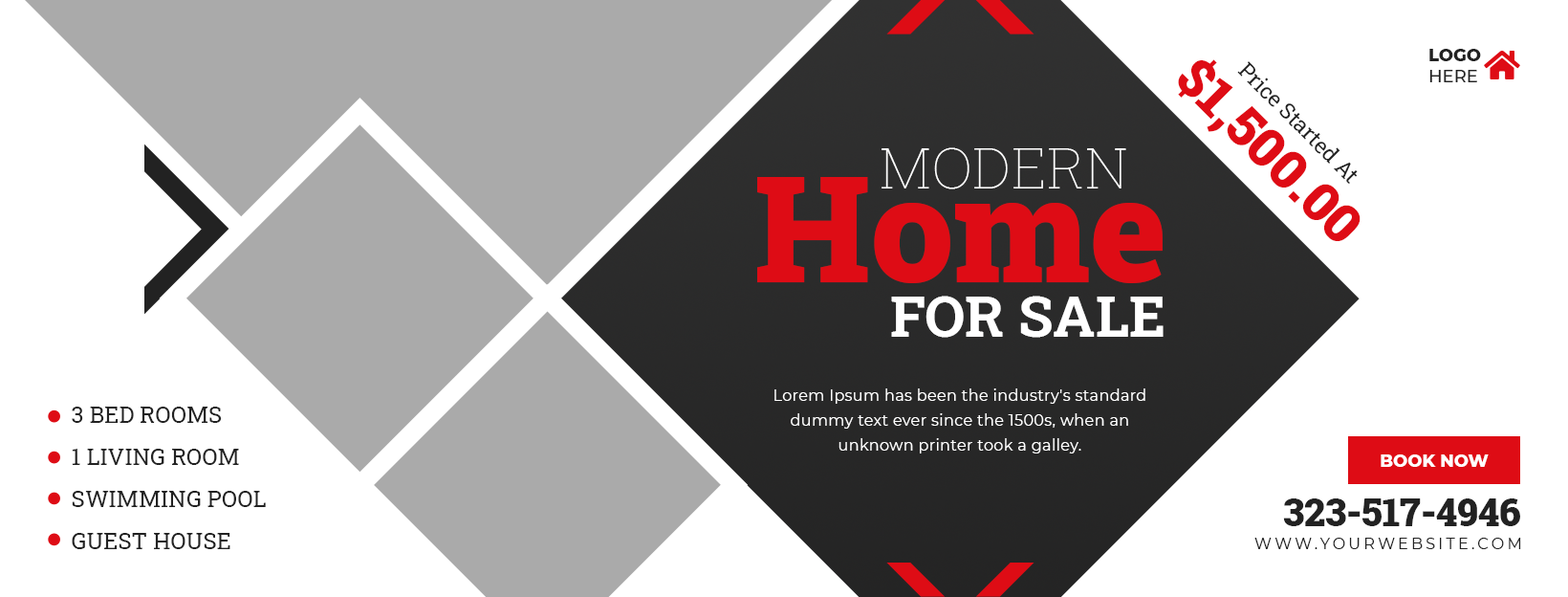
<style>
.page{position:relative;width:1568px;height:597px;background:#ffffff}
.page>*{position:absolute;margin:0}
.t1{font:17.2px "Montserrat-ExtraBold";color:#222222;text-transform:uppercase}
.t2{font:17.2px "Montserrat-Medium";color:#222222;text-transform:uppercase}
.t3{font:53.9px "RobotoSlab-Black";color:#de0c15}
.t4{font:21.6px "RobotoSlab-Regular";color:#222222}
.t5{font:57.4px "RobotoSlab-Thin";color:#ffffff;text-transform:uppercase}
.t6{font:147.2px "RobotoSlab-Black";color:#de0c15}
.t7{font:57.4px "RobotoSlab-Bold";color:#ffffff;text-transform:uppercase}
.t8{font:15.3px/24.9px "Montserrat-Regular";letter-spacing:0.025em;color:#ffffff}
.t9{font:22.9px/42.1px "RobotoSlab-Regular";color:#222222;text-transform:uppercase}
.t10{font:17.2px "Montserrat-ExtraBold";color:#ffffff;text-transform:uppercase}
.t11{font:38.2px "RobotoSlab-Black";color:#222222}
.t12{font:15.3px "Montserrat-Regular";letter-spacing:0.2em;color:#222222;text-transform:uppercase}
</style>
<div class="page">
<p class="t1" style="left:1429px;top:49px;width:52px;height:33px">Logo<br><span class="t2">Here</span></p>
<p class="t3" style="left:1178px;top:59px;width:183px;height:182px;rotate:45deg">$1,500.00</p>
<p class="t4" style="left:1237px;top:61px;width:121px;height:124px;rotate:45deg">Price Started At</p>
<p class="t5" style="left:882px;top:147px;width:244px;height:42px">Modern</p>
<p class="t6" style="left:757px;top:177px;width:406px;height:106px">Home</p>
<p class="t7" style="left:891px;top:295px;width:273px;height:43px">For Sale</p>
<p class="t8" style="left:774px;top:388px;width:371px;height:65px;text-align:center">Lorem Ipsum has been the industry's standard dummy text ever since the 1500s, when an unknown printer took a galley.</p>
<p class="t9" style="left:72px;top:406px;width:194px;height:143px">3 Bed Rooms<br>1 Living Room<br>Swimming Pool<br>Guest House</p>
<p class="t10" style="left:1381px;top:454px;width:108px;height:13px">Book Now</p>
<p class="t11" style="left:1283px;top:498px;width:237px;height:28px">323-517-4946</p>
<p class="t12" style="left:1254px;top:537px;width:267px;height:12px">www.yourwebsite.com</p>
</div>
